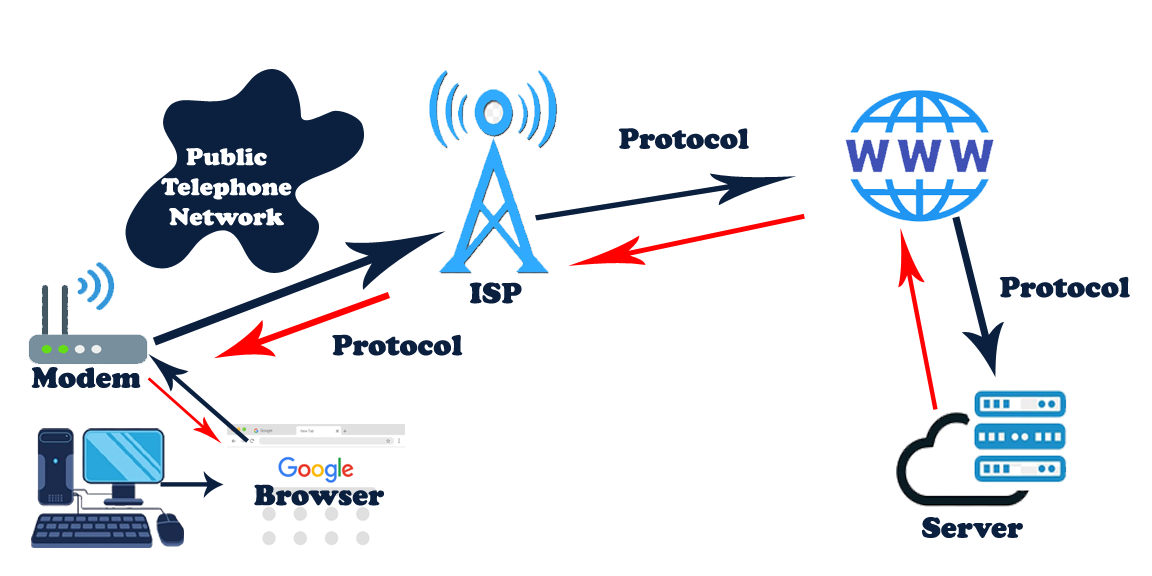
<style>
.page{position:relative;width:1152px;height:576px;background:#ffffff}
.page>*{position:absolute;margin:0}
.t1{font:30px "CooperBlack";color:#0b203f}
.t2{font:25px "CooperBlack";color:#ffffff}
</style>
<div class="page">
<p class="t1" style="left:618px;top:128px;width:131px;height:21px">Protocol</p>
<p class="t2" style="left:161px;top:148px;width:131px;height:78px;text-align:center">Public<br>Telephone<br>Network</p>
<p class="t1" style="left:999px;top:276px;width:131px;height:22px">Protocol</p>
<p class="t1" style="left:469px;top:282px;width:53px;height:22px">ISP</p>
<p class="t1" style="left:332px;top:334px;width:131px;height:22px">Protocol</p>
<p class="t1" style="left:31px;top:367px;width:110px;height:21px">Modem</p>
<p class="t1" style="left:254px;top:484px;width:130px;height:22px">Browser</p>
<p class="t1" style="left:922px;top:517px;width:101px;height:21px">Server</p>
</div>
